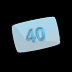
<style>
.page{position:relative;width:72px;height:72px;background:#000000}
.page>*{position:absolute;margin:0}
.t1{font:18.1px "DroidSans-Bold"}
</style>
<div class="page">
<p class="t1" style="left:26px;top:27px;width:20px;height:16px;rotate:-11deg">40</p>
</div>
